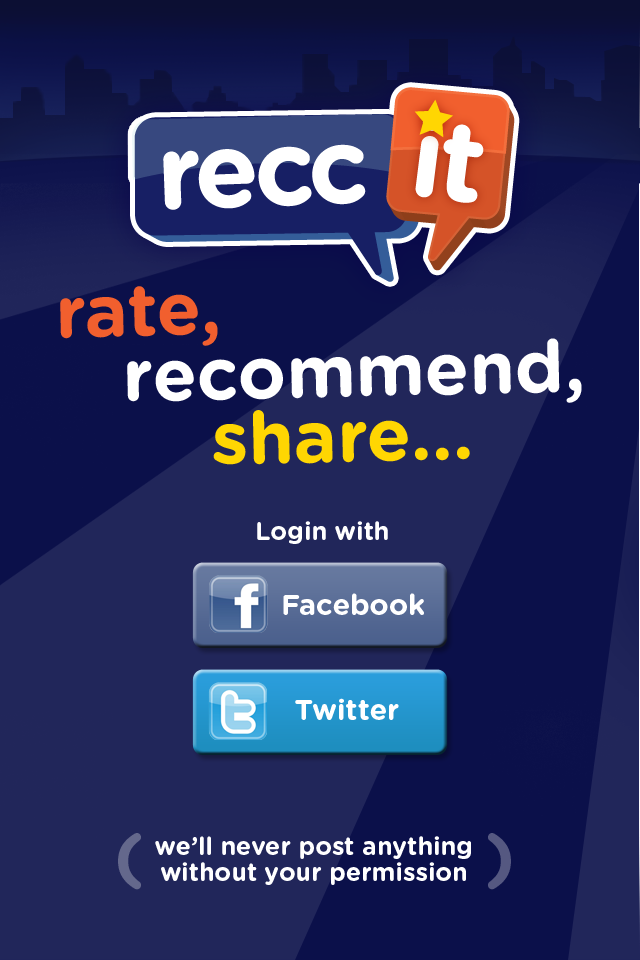
<style>
.page{position:relative;width:640px;height:960px;background:#21265a}
.page>*{position:absolute;margin:0}
.t1{font:73px/65.1px "GothamRounded-Bold";color:#ffffff}
.t2{font:73px/65.1px "GothamRounded-Bold";color:#f15f2e}
.t3{font:73px/65.1px "GothamRounded-Bold";color:#ffd602}
.t4{font:25px "GothamRounded-Bold";color:#ffffff}
.t5{font:29px "GothamRounded-Bold";color:#ffffff}
.t6{font:25px/26px "GothamRounded-Bold";color:#ffffff}
</style>
<div class="page">
<p class="t1" style="left:60px;top:286px;width:522px;height:179px;rotate:-1deg"><span class="t2">rate, <br></span>   recommend, <br><span class="t3">       share...</span></p>
<p class="t4" style="left:257px;top:521px;width:131px;height:23px">Login with</p>
<p class="t5" style="left:283px;top:593px;width:141px;height:22px">Facebook</p>
<p class="t5" style="left:295px;top:698px;width:104px;height:22px">Twitter</p>
<p class="t6" style="left:155px;top:836px;width:316px;height:49px;text-align:center">we’ll never post anything<br>without your permission</p>
</div>
